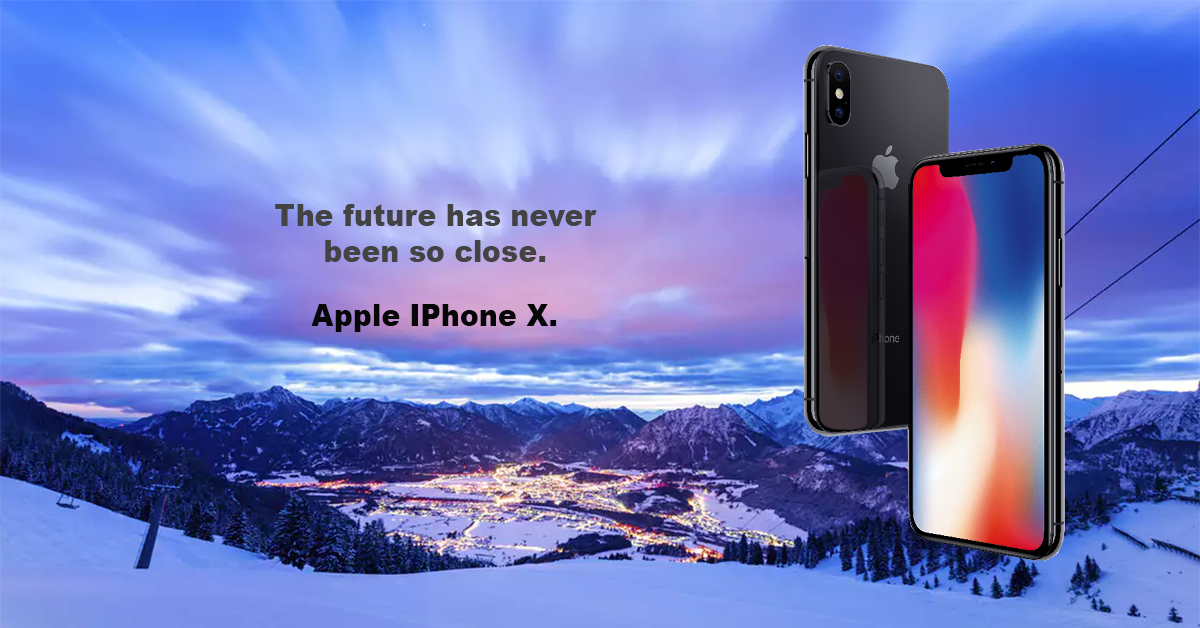
<style>
.page{position:relative;width:1200px;height:628px}
.page>*{position:absolute;margin:0}
.t1{font:29.7px "Arial-Black";color:#434343;scale:0.96 1}
.t2{font:29.7px "Arial-Black";color:#070707;scale:0.96 1}
</style>
<div class="page">
<p class="t1" style="left:275px;top:204px;width:322px;height:58px;text-align:center">The future has never been so close.</p>
<p class="t2" style="left:311px;top:304px;width:246px;height:28px">Apple IPhone X.</p>
</div>
